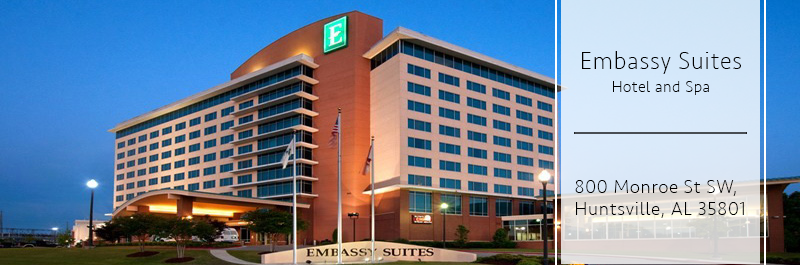
<style>
.page{position:relative;width:800px;height:265px}
.page>*{position:absolute;margin:0}
.t1{font:25px "Seravek-ExtraLight";letter-spacing:0.05em;color:#000000;scale:0.94 1}
.t2{font:15.6px "Seravek-ExtraLight";letter-spacing:0.05em;color:#000000}
.t3{font:18.7px "Seravek-ExtraLight";letter-spacing:0.05em;color:#000000}
</style>
<div class="page">
<p class="t1" style="left:582px;top:51px;width:159px;height:23px">Embassy Suites</p>
<p class="t2" style="left:613px;top:81px;width:96px;height:14px">Hotel and Spa</p>
<p class="t3" style="left:575px;top:180px;width:169px;height:38px">800 Monroe St SW, Huntsville, AL 35801</p>
</div>
